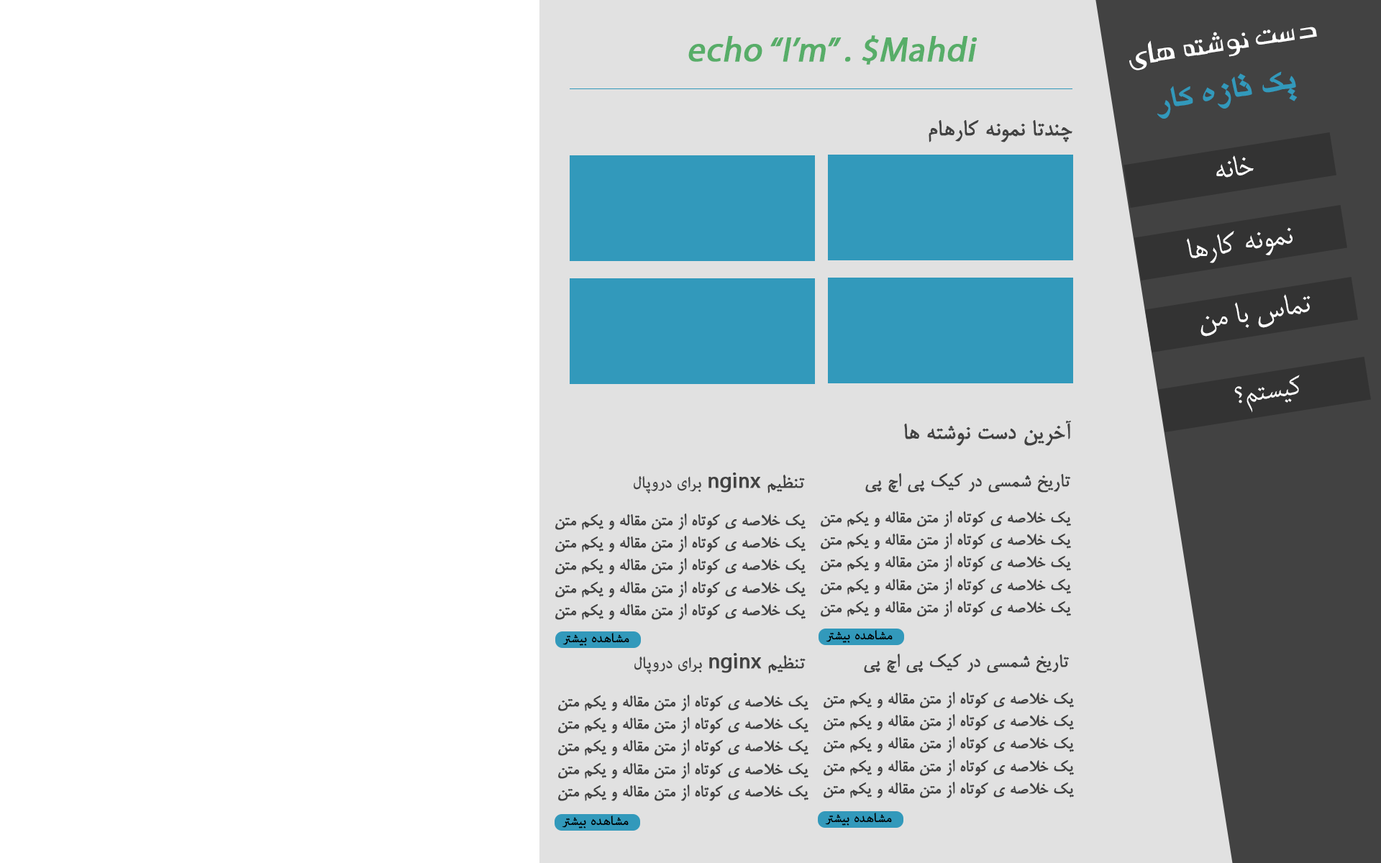
<style>
.page{position:relative;width:1381px;height:863px;background:#ffffff}
.page>*{position:absolute;margin:0}
.t1{font:34.5px "Mj_Abasan";color:#ffffff}
.t2{font:34.5px "MyriadPro-Regular";color:#57ad68;font-weight:bold;font-style:italic}
.t3{font:34.5px "2--Yagut_MRT";color:#3299bb}
.t4{font:25.9px "Mitra";color:#424242;font-weight:bold}
.t5{font:34.5px "Mitra";color:#ffffff}
.t6{font:34.5px "AdobeArabic-Regular";color:#ffffff}
.t7{font:21.6px "AdobeArabic-Regular";color:#424242;font-weight:bold}
.t8{font:21.6px "Mitra";color:#424242;font-weight:bold}
.t9{font:21.6px "MyriadPro-Regular";color:#424242;font-weight:bold}
.t10{font:18.7px "Mitra";color:#424242;font-weight:bold}
.t11{font:17.3px "AdobeArabic-Regular";color:#000000;font-weight:bold}
</style>
<div class="page">
<p class="t1" style="left:1129px;top:27px;width:188px;height:44px;rotate:-9deg">دست نوشته های</p>
<p class="t2" style="left:688px;top:35px;width:289px;height:30px">echo “I’m” . $Mahdi</p>
<p class="t3" style="left:1157px;top:71px;width:141px;height:48px;rotate:-9deg">یک تازه کار</p>
<p class="t4" style="left:929px;top:120px;width:144px;height:22px">چندتا نمونه کارهام</p>
<p class="t5" style="left:1217px;top:155px;width:37px;height:23px;rotate:-9deg">خانه</p>
<p class="t5" style="left:1187px;top:227px;width:106px;height:36px;rotate:-9deg">نمونه کارها</p>
<p class="t5" style="left:1201px;top:294px;width:110px;height:43px;rotate:-9deg">تماس با من</p>
<p class="t6" style="left:1235px;top:375px;width:65px;height:38px;rotate:-9deg">کیستم؟</p>
<p class="t4" style="left:904px;top:421px;width:167px;height:25px">آخرین دست نوشته ها</p>
<p class="t7" style="left:634px;top:473px;width:171px;height:21px"><span class="t8">تنظیم </span><span class="t9">nginx </span>برای دروپال</p>
<p class="t8" style="left:865px;top:473px;width:206px;height:20px">تاریخ شمسی در کیک پی اچ پی</p>
<p class="t10" style="left:555px;top:514px;width:251px;height:106px">یک خلاصه ی کوتاه از متن مقاله و یکم متن<br>یک خلاصه ی کوتاه از متن مقاله و یکم متن<br>یک خلاصه ی کوتاه از متن مقاله و یکم متن<br>یک خلاصه ی کوتاه از متن مقاله و یکم متن<br>یک خلاصه ی کوتاه از متن مقاله و یکم متن</p>
<p class="t10" style="left:821px;top:511px;width:250px;height:106px">یک خلاصه ی کوتاه از متن مقاله و یکم متن<br>یک خلاصه ی کوتاه از متن مقاله و یکم متن<br>یک خلاصه ی کوتاه از متن مقاله و یکم متن<br>یک خلاصه ی کوتاه از متن مقاله و یکم متن<br>یک خلاصه ی کوتاه از متن مقاله و یکم متن</p>
<p class="t11" style="left:563px;top:633px;width:66px;height:13px">مشاهده بیشتر</p>
<p class="t11" style="left:826px;top:630px;width:67px;height:13px">مشاهده بیشتر</p>
<p class="t7" style="left:635px;top:653px;width:171px;height:22px"><span class="t8">تنظیم </span><span class="t9">nginx </span>برای دروپال</p>
<p class="t8" style="left:864px;top:654px;width:206px;height:19px">تاریخ شمسی در کیک پی اچ پی</p>
<p class="t10" style="left:558px;top:695px;width:251px;height:106px">یک خلاصه ی کوتاه از متن مقاله و یکم متن<br>یک خلاصه ی کوتاه از متن مقاله و یکم متن<br>یک خلاصه ی کوتاه از متن مقاله و یکم متن<br>یک خلاصه ی کوتاه از متن مقاله و یکم متن<br>یک خلاصه ی کوتاه از متن مقاله و یکم متن</p>
<p class="t10" style="left:824px;top:692px;width:250px;height:107px">یک خلاصه ی کوتاه از متن مقاله و یکم متن<br>یک خلاصه ی کوتاه از متن مقاله و یکم متن<br>یک خلاصه ی کوتاه از متن مقاله و یکم متن<br>یک خلاصه ی کوتاه از متن مقاله و یکم متن<br>یک خلاصه ی کوتاه از متن مقاله و یکم متن</p>
<p class="t11" style="left:562px;top:816px;width:67px;height:13px">مشاهده بیشتر</p>
<p class="t11" style="left:825px;top:813px;width:67px;height:13px">مشاهده بیشتر</p>
</div>
